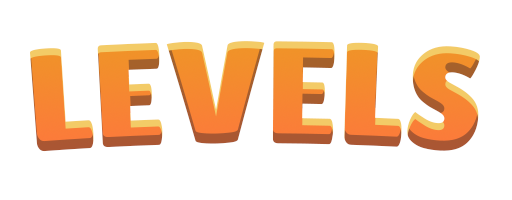
<style>
.page{position:relative;width:512px;height:200px;background:#ffffff}
.page>*{position:absolute;margin:0}
.t1{font:145.6px "LilitaOne"}
</style>
<div class="page">
<p class="t1" style="left:30px;top:41px;width:450px;height:111px">LEVELS</p>
</div>
